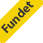
<style>
.page{position:relative;width:43px;height:43px;background:#ffffff}
.page>*{position:absolute;margin:0}
.t1{font:13px "MyriadPro-Bold";letter-spacing:-0.025em;color:#333333}
</style>
<div class="page">
<p class="t1" style="left:0px;top:1px;width:34px;height:33px;rotate:-46deg">Fundet</p>
</div>
